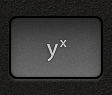
<style>
.page{position:relative;width:112px;height:95px}
.page>*{position:absolute;margin:0}
.t1{font:24px "MyriadPro-Regular";letter-spacing:0.1em;color:#cdcdd0}
.t2{font:24px "MyriadPro-Regular";color:#cdcdd0}
</style>
<div class="page">
<p class="t1" style="left:47px;top:40px;width:20px;height:21px">y<span class="t2">x</span></p>
</div>
